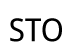
<style>
.page{position:relative;width:70px;height:55px;background:#ffffff}
.page>*{position:absolute;margin:0}
.t1{font:31.8px "DroidSans";color:#000000}
</style>
<div class="page">
<p class="t1" style="left:10px;top:18px;width:52px;height:24px">STO</p>
</div>
